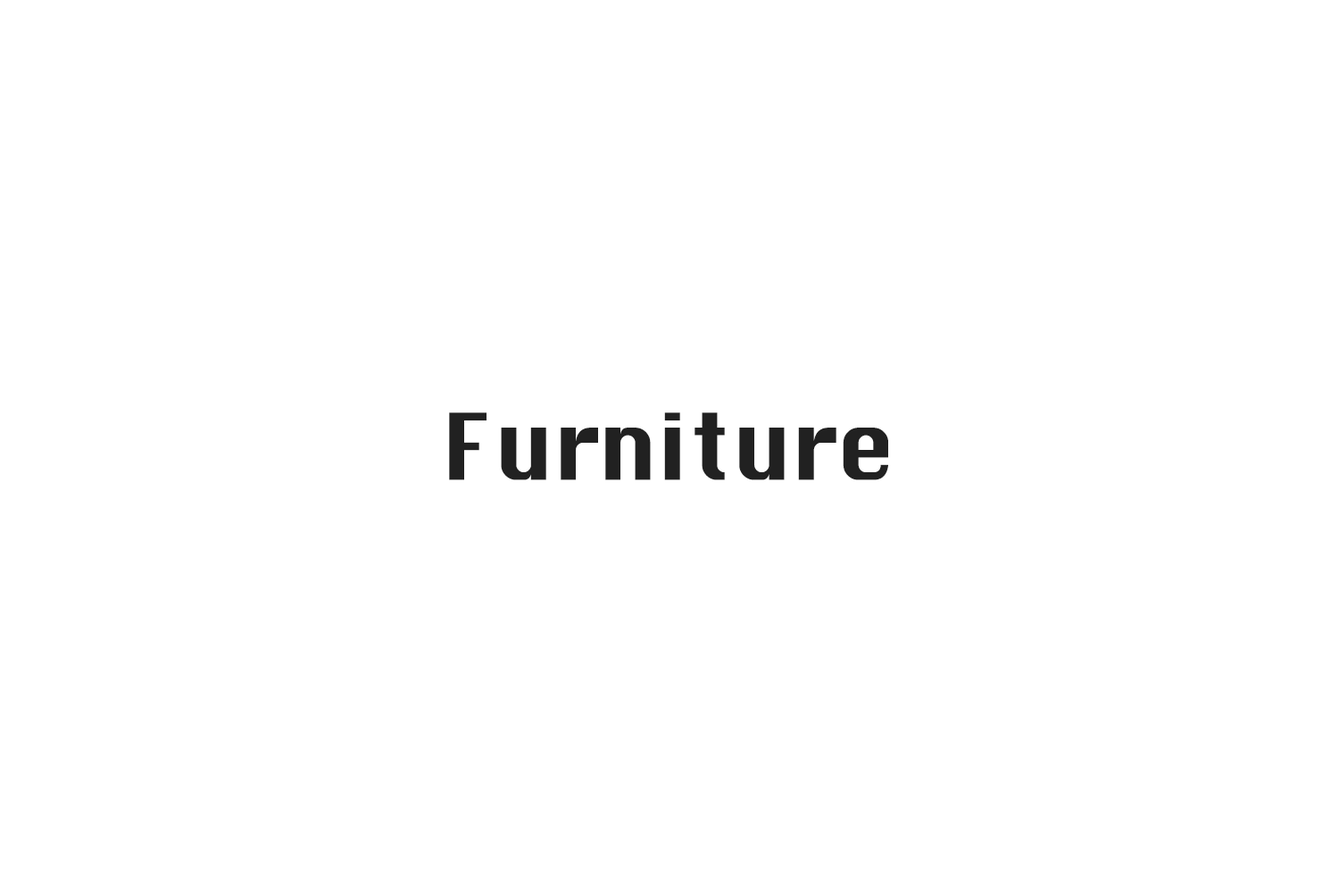
<style>
.page{position:relative;width:1339px;height:890px;background:#ffffff}
.page>*{position:absolute;margin:0}
.t1{font:89.3px "Silom";color:#212121}
</style>
<div class="page">
<p class="t1" style="left:449px;top:413px;width:439px;height:67px">Furniture</p>
</div>
